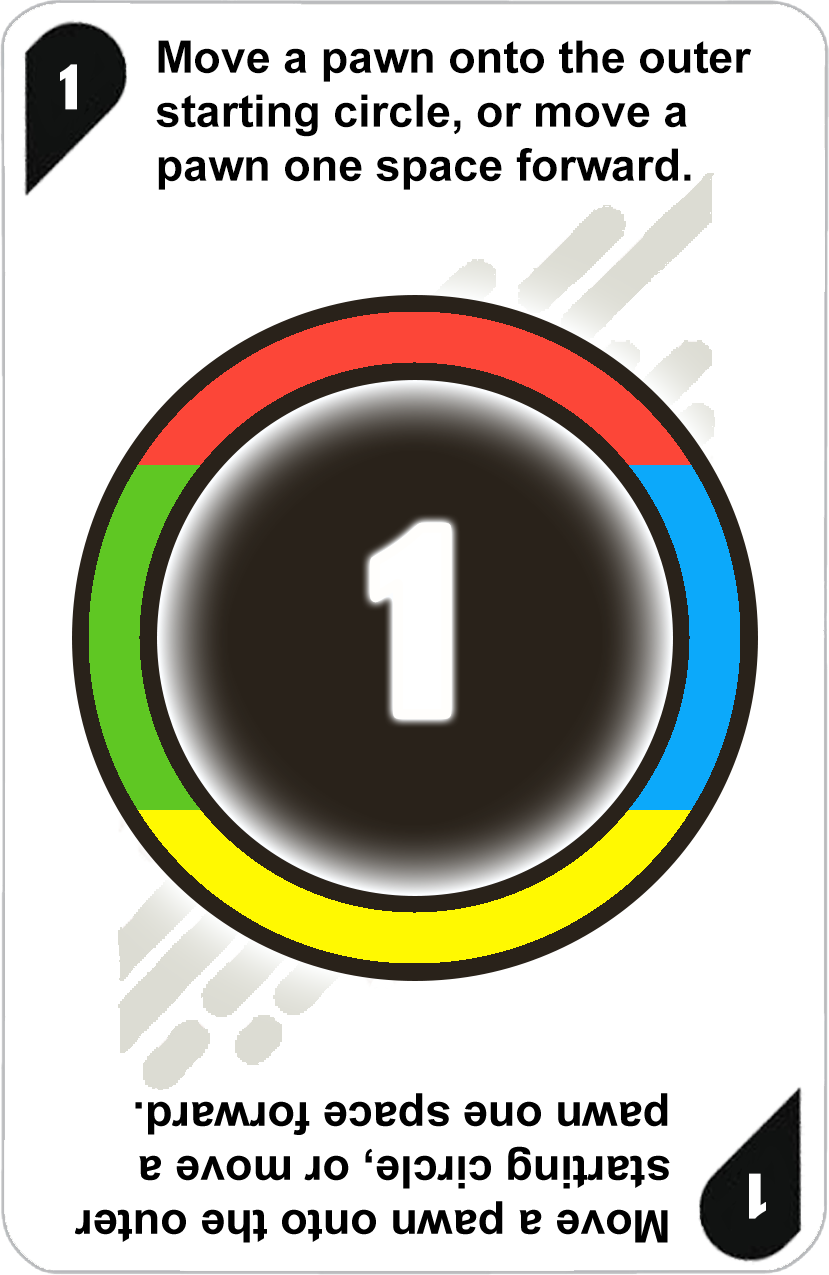
<style>
.page{position:relative;width:829px;height:1275px;background:#ffffff}
.page>*{position:absolute;margin:0}
.t1{font:45px "Arial-BoldMT";color:#000000}
.t2{font:72px "AdGothic-Regular";color:#ffffff}
.t3{font:300px "AdGothic-Regular";color:#ffffff}
</style>
<div class="page">
<p class="t1" style="left:156px;top:40px;width:596px;height:150px">Move a pawn onto the outer<br>starting circle, or move a <br>pawn one space forward.</p>
<p class="t2" style="left:60px;top:64px;width:17px;height:46px">1</p>
<p class="t3" style="left:375px;top:527px;width:72px;height:187px">1</p>
</div>
